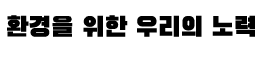
<style>
.page{position:relative;width:262px;height:57px;background:#ffffff}
.page>*{position:absolute;margin:0}
.t1{font:27.2px "BlackHanSans-Regular";color:#000000}
</style>
<div class="page">
<p class="t1" style="left:7px;top:15px;width:248px;height:22px">환경을 위한 우리의 노력</p>
</div>
